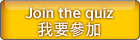
<style>
.page{position:relative;width:140px;height:40px}
.page>*{position:absolute;margin:0}
.t1{font:14px/17px "BritishCouncilSans-Bold";color:#ffffff}
.t2{font:16px/17px "DFHeiStd-W7";color:#ffffff}
</style>
<div class="page">
<p class="t1" style="left:25px;top:7px;width:88px;height:30px;text-align:center">Join the quiz<br><span class="t2">我要參加</span></p>
</div>
